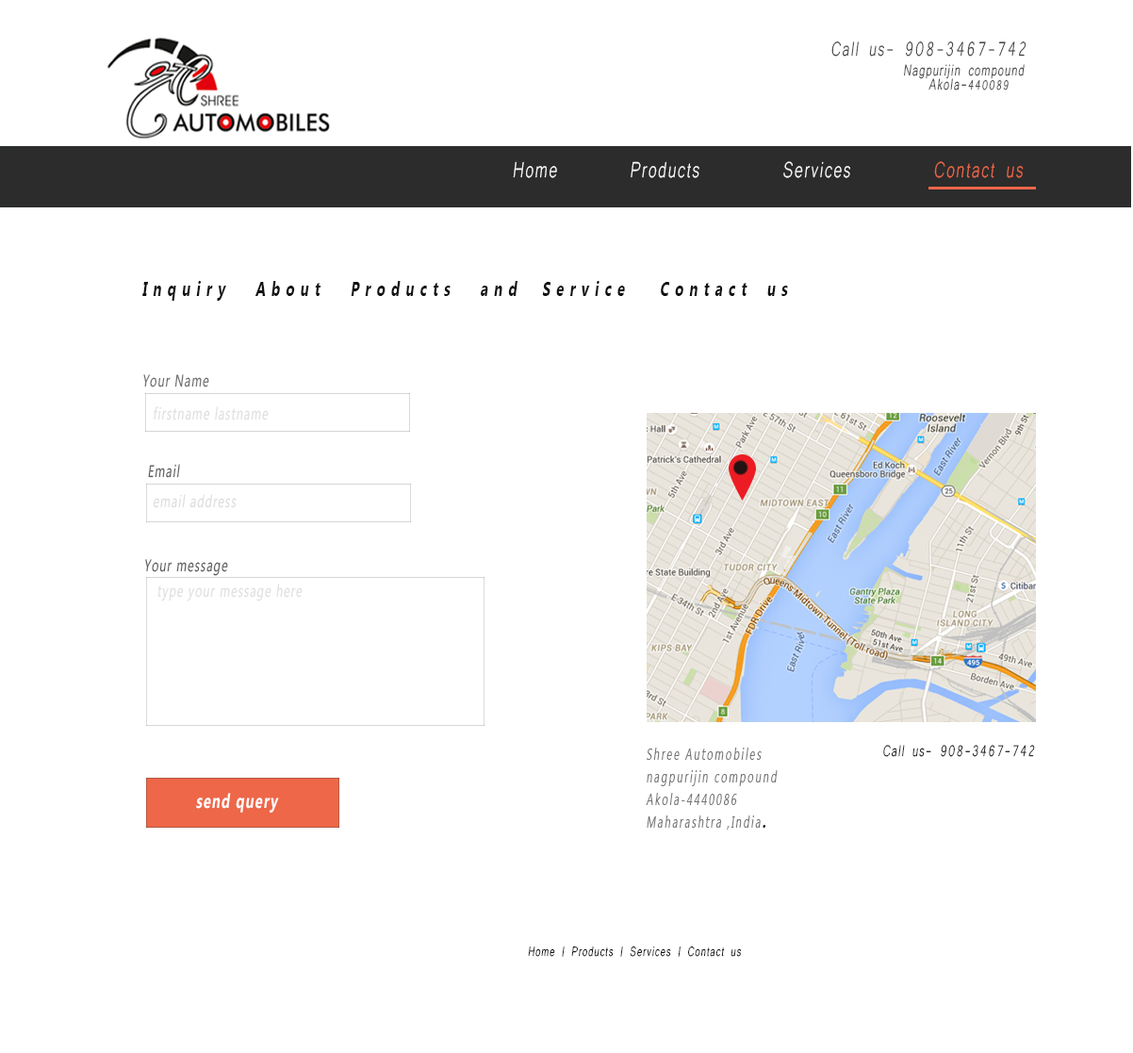
<style>
.page{position:relative;width:1133px;height:1053px;background:#ffffff}
.page>*{position:absolute;margin:0}
.t1{font:25.4px "Microsoft-Yi-Baiti";letter-spacing:0.08em;color:#3b3c3a;font-style:italic;scale:0.7 1}
.t2{font:19.8px "Microsoft-Yi-Baiti";letter-spacing:0.08em;color:#545152;font-style:italic;scale:0.7 1}
.t3{font:17px "Microsoft-Yi-Baiti";letter-spacing:0.08em;color:#545152;font-style:italic;scale:0.7 1}
.t4{font:28.3px "Microsoft-Yi-Baiti";letter-spacing:0.08em;color:#fdfcfc;font-style:italic;scale:0.7 1}
.t5{font:28.3px "Microsoft-Yi-Baiti";letter-spacing:0.08em;color:#ed6748;font-style:italic;scale:0.7 1}
.t6{font:19.8px "MicrosoftTaiLe-Bold";letter-spacing:0.08em;color:#121212;font-style:italic;scale:0.7 1}
.t7{font:17px "MicrosoftPhagsPa";letter-spacing:0.08em;color:#6d6a6a;font-style:italic;scale:0.7 1}
.t8{font:17px "MicrosoftPhagsPa";letter-spacing:0.08em;color:#e0dfdf;font-style:italic;scale:0.7 1}
.t9{font:17px "MicrosoftPhagsPa";letter-spacing:0.08em;color:#5c5959;font-style:italic;scale:0.7 1}
.t10{font:17px "MicrosoftPhagsPa";letter-spacing:0.08em;color:#dedddd;font-style:italic;scale:0.7 1}
.t11{font:15.5px/22.6px "MicrosoftTaiLe";letter-spacing:0.14em;color:#777575;font-style:italic;scale:0.7 1}
.t12{font:19.8px/17px "MicrosoftTaiLe-Bold";letter-spacing:0.08em;color:#121212;font-style:italic;scale:0.7 1}
.t13{font:19.8px "Microsoft-Yi-Baiti";letter-spacing:0.08em;color:#2c2c2c;font-style:italic;scale:0.7 1}
.t14{font:19.8px "MicrosoftPhagsPa-Bold";letter-spacing:0.08em;color:#fdfafa;font-style:italic;scale:0.7 1}
.t15{font:17px "Microsoft-Yi-Baiti";letter-spacing:0.08em;color:#121212;font-style:italic;scale:0.7 1}
</style>
<div class="page">
<p class="t1" style="left:831px;top:41px;width:195px;height:16px">Call us- 908-3467-742</p>
<p class="t2" style="left:904px;top:64px;width:120px;height:15px">Nagpurijin compound</p>
<p class="t2" style="left:928px;top:78px;width:80px;height:12px">Akola-<span class="t3">440089</span></p>
<p class="t4" style="left:513px;top:161px;width:510px;height:17px">Home       Products        Services      <span class="t5">  Contact us</span></p>
<p class="t6" style="left:142px;top:281px;width:646px;height:20px">I n q u i r y      A b o u t      P r o d u c t s      a n d     S e r v i c e       C o n t a c t    u s</p>
<p class="t7" style="left:143px;top:374px;width:66px;height:13px">Your Name</p>
<p class="t8" style="left:154px;top:406px;width:115px;height:14px">firstname lastname</p>
<p class="t9" style="left:148px;top:464px;width:32px;height:14px">Email</p>
<p class="t10" style="left:153px;top:494px;width:84px;height:14px">email address</p>
<p class="t9" style="left:145px;top:559px;width:83px;height:17px">Your message</p>
<p class="t8" style="left:157px;top:583px;width:146px;height:18px">type your message here</p>
<p class="t11" style="left:646px;top:747px;width:131px;height:82px">Shree Automobiles<br>nagpurijin compound<br>Akola-4440086<br>Maharashtra ,India<span class="t12">.</span></p>
<p class="t13" style="left:883px;top:745px;width:152px;height:12px">Call us- 908-3467-742</p>
<p class="t14" style="left:196px;top:793px;width:83px;height:19px">send query</p>
<p class="t15" style="left:528px;top:946px;width:213px;height:11px">Home | Products | Services | Contact us</p>
</div>
